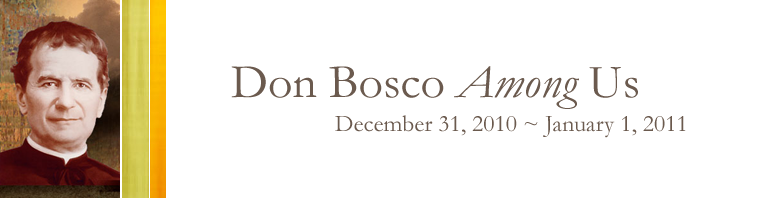
<style>
.page{position:relative;width:770px;height:198px;background:#ffffff}
.page>*{position:absolute;margin:0}
.t1{font:48px "Garamond";color:#6b5a4e}
.t2{font:48px "Garamond-Italic";color:#6b5a4e}
.t3{font:24px "Garamond";color:#6b5a4e}
</style>
<div class="page">
<p class="t1" style="left:231px;top:66px;width:407px;height:43px">Don Bosco <span class="t2">Among </span>Us</p>
<p class="t3" style="left:335px;top:115px;width:351px;height:23px">December 31, 2010 ~ January 1, 2011</p>
</div>
